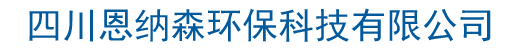
<style>
.page{position:relative;width:510px;height:53px;background:#ffffff}
.page>*{position:absolute;margin:0}
.t1{font:36px "SimHei";color:#02599b}
</style>
<div class="page">
<p class="t1" style="left:29px;top:8px;width:462px;height:34px">四川恩纳森环保科技有限公司</p>
</div>
